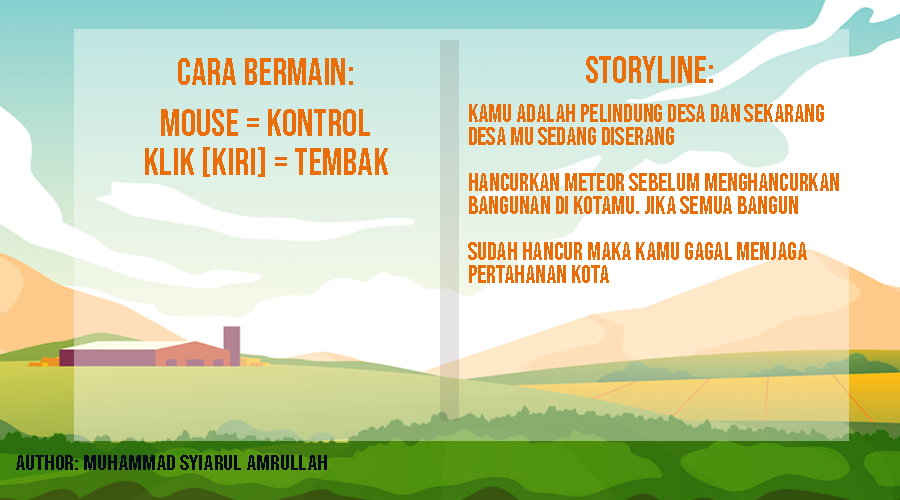
<style>
.page{position:relative;width:900px;height:500px}
.page>*{position:absolute;margin:0}
.t1{font:37.5px "BebasNeue-Regular";color:#e96d08}
.t2{font:37.5px/39.8px "BebasNeue-Regular";color:#e96d08}
.t3{font:25px/23.1px "BebasNeue-Regular";color:#e96d08}
.t4{font:20.9px "BebasNeue-Regular";color:#050b1a;scale:1.2 1}
</style>
<div class="page">
<p class="t1" style="left:178px;top:58px;width:175px;height:27px">cara bermain:</p>
<p class="t1" style="left:586px;top:56px;width:127px;height:27px">storyline:</p>
<p class="t2" style="left:145px;top:109px;width:243px;height:68px;text-align:center">mouse = kontrol<br>klik [kiri] = tembak</p>
<p class="t3" style="left:468px;top:104px;width:371px;height:179px">kamu adalah pelindung desa dan sekarang <br>desa mu sedang diserang <br><br>Hancurkan meteor sebelum menghancurkan<br>bangunan di kotamu. jika semua bangun<br><br>sudah hancur maka kamu gagal menjaga<br>pertahanan kota</p>
<p class="t4" style="left:16px;top:455px;width:311px;height:15px">author: Muhammad syiarul amrullah</p>
</div>
